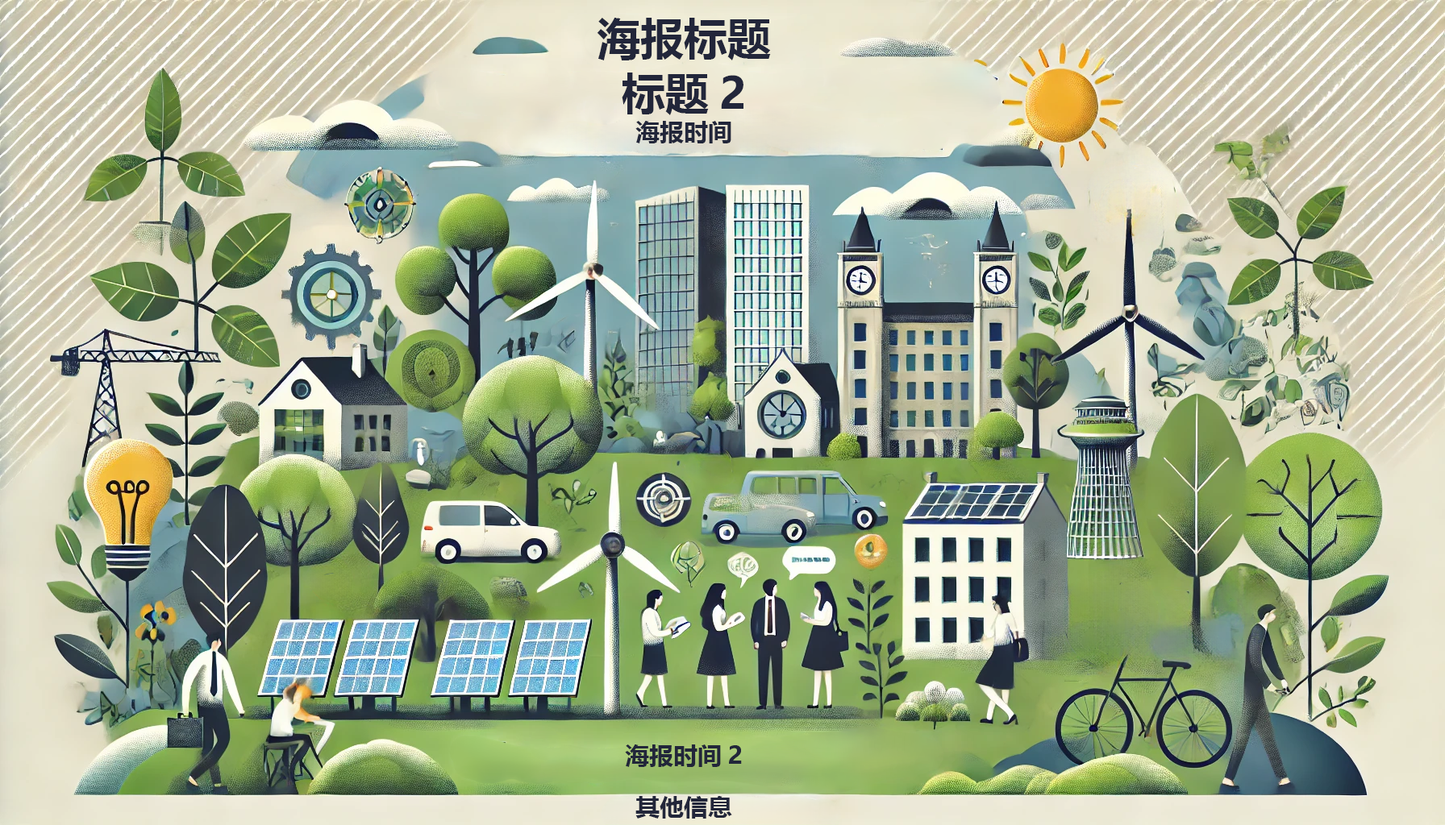
<style>
.page{position:relative;width:1445px;height:825px}
.page>*{position:absolute;margin:0}
.t1{font:43.5px/54.8px "MicrosoftYaHeiUI-Bold";color:#222639}
.t2{font:24.2px "MicrosoftYaHeiUI-Bold";color:#222639}
</style>
<div class="page">
<p class="t1" style="left:597px;top:18px;width:174px;height:97px;text-align:center">海报标题<br>标题2</p>
<p class="t2" style="left:635px;top:121px;width:96px;height:22px">海报时间</p>
<p class="t2" style="left:625px;top:745px;width:117px;height:22px">海报时间2</p>
<p class="t2" style="left:635px;top:796px;width:97px;height:23px">其他信息</p>
</div>
